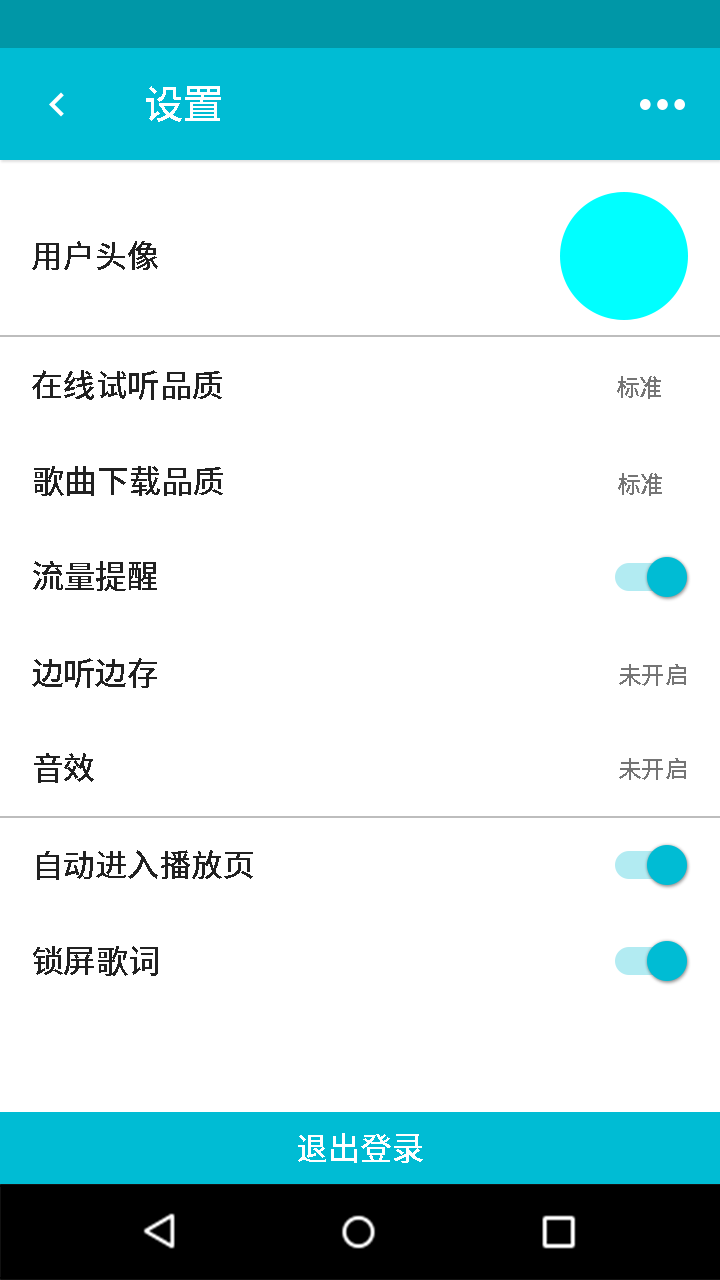
<style>
.page{position:relative;width:720px;height:1280px;background:#ffffff}
.page>*{position:absolute;margin:0}
.t1{font:40px "SourceHanSansCN-Medium";color:#ffffff}
.t2{font:32px "SourceHanSansCN-Medium";color:#212121}
.t3{font:24px "SourceHanSansCN-Medium";color:#757575}
.t4{font:32px "SourceHanSansCN-Medium";color:#ffffff}
</style>
<div class="page">
<p class="t1" style="left:146px;top:86px;width:75px;height:36px">设置</p>
<p class="t2" style="left:32px;top:241px;width:126px;height:29px">用户头像</p>
<p class="t2" style="left:32px;top:370px;width:190px;height:30px">在线试听品质</p>
<p class="t3" style="left:617px;top:376px;width:44px;height:23px">标准</p>
<p class="t2" style="left:34px;top:466px;width:189px;height:30px">歌曲下载品质</p>
<p class="t3" style="left:618px;top:473px;width:44px;height:23px">标准</p>
<p class="t2" style="left:33px;top:561px;width:124px;height:30px">流量提醒</p>
<p class="t2" style="left:32px;top:658px;width:125px;height:30px">边听边存</p>
<p class="t3" style="left:619px;top:664px;width:67px;height:22px">未开启</p>
<p class="t2" style="left:34px;top:753px;width:60px;height:30px">音效</p>
<p class="t3" style="left:619px;top:758px;width:67px;height:22px">未开启</p>
<p class="t2" style="left:37px;top:850px;width:216px;height:30px">自动进入播放页</p>
<p class="t2" style="left:33px;top:946px;width:125px;height:30px">锁屏歌词</p>
<p class="t4" style="left:298px;top:1133px;width:125px;height:30px">退出登录</p>
</div>
